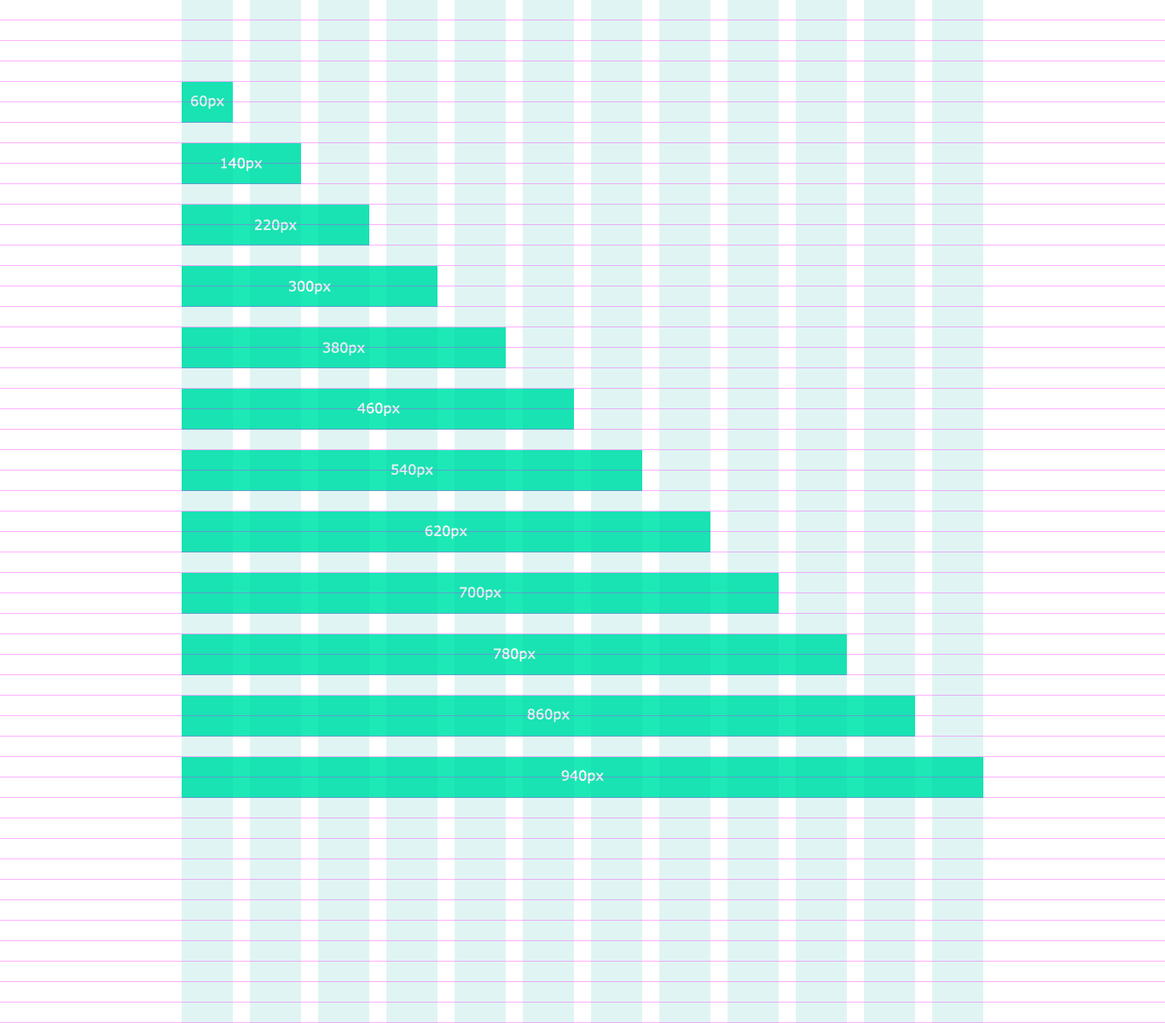
<style>
.page{position:relative;width:1165px;height:1023px;background:#ffffff}
.page>*{position:absolute;margin:0}
.t1{font:13.6px "Verdana";letter-spacing:0.01em;color:#e0f5f3}
.t2{font:13.6px "Verdana";letter-spacing:0.01em}
.t3{font:13.6px "Verdana";letter-spacing:0.01em;color:#f4f5fb}
</style>
<div class="page">
<p class="t1" style="left:191px;top:96px;width:33px;height:13px">60px</p>
<p class="t2" style="left:221px;top:158px;width:42px;height:13px">140px</p>
<p class="t1" style="left:255px;top:219px;width:42px;height:14px">220px</p>
<p class="t2" style="left:289px;top:281px;width:42px;height:13px">300px</p>
<p class="t1" style="left:323px;top:342px;width:42px;height:14px">380px</p>
<p class="t3" style="left:357px;top:403px;width:43px;height:13px">460px</p>
<p class="t1" style="left:391px;top:464px;width:42px;height:14px">540px</p>
<p class="t3" style="left:425px;top:525px;width:42px;height:14px">620px</p>
<p class="t1" style="left:460px;top:587px;width:42px;height:13px">700px</p>
<p class="t2" style="left:494px;top:648px;width:42px;height:14px">780px</p>
<p class="t1" style="left:527px;top:709px;width:43px;height:13px">860px</p>
<p class="t2" style="left:561px;top:770px;width:43px;height:14px">940px</p>
</div>
